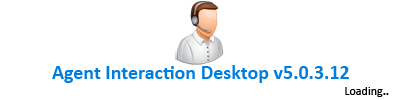
<style>
.page{position:relative;width:400px;height:100px;background:#ffffff}
.page>*{position:absolute;margin:0}
.t1{font:20px "Calibri-Bold";color:#007edf}
.t2{font:12px "Calibri";color:#000000}
.t3{font:12px "Calibri-Bold";color:#000000}
</style>
<div class="page">
<p class="t1" style="left:52px;top:65px;width:297px;height:18px">Agent Interaction Desktop v5.0.3.12</p>
<p class="t2" style="left:345px;top:87px;width:44px;height:10px">Loading<span class="t3">..</span></p>
</div>
